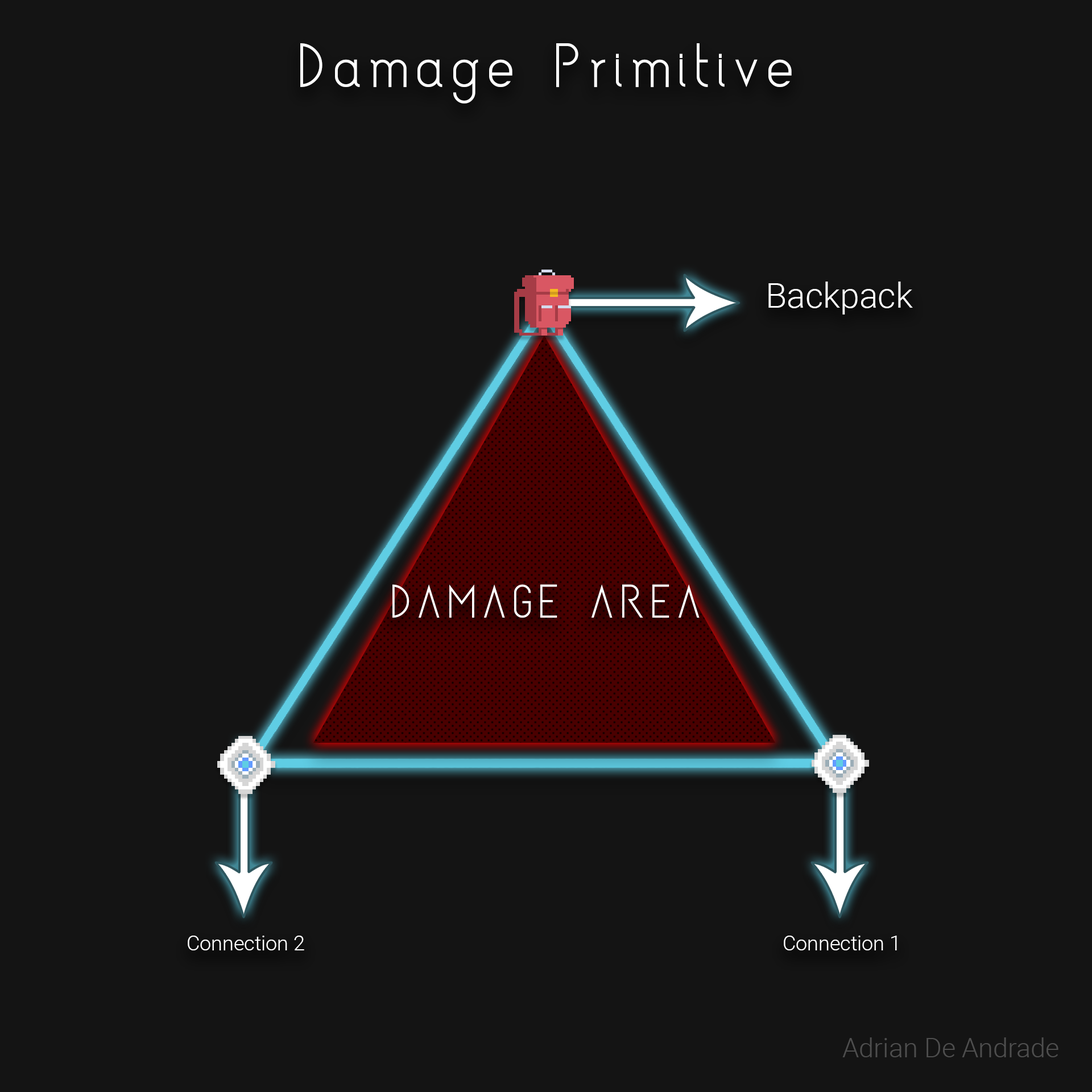
<style>
.page{position:relative;width:1092px;height:1092px;background:#141414}
.page>*{position:absolute;margin:0}
.t1{font:88.7px "Asgalt-Regular";letter-spacing:0.08em;color:#ffffff}
.t2{font:34.6px "Roboto-Light";color:#ffffff}
.t3{font:67px "Asgalt-Regular";letter-spacing:0.08em;color:#ffffff}
.t4{font:20.4px "Roboto-Light";color:#ffffff}
.t5{font:26.7px "Roboto-Light";color:#4e4e4e}
</style>
<div class="page">
<p class="t1" style="left:300px;top:43px;width:492px;height:61px">Damage Primitive</p>
<p class="t2" style="left:768px;top:282px;width:145px;height:33px">Backpack</p>
<p class="t3" style="left:392px;top:584px;width:308px;height:34px">DAMAGE AREA</p>
<p class="t4" style="left:188px;top:936px;width:116px;height:14px">Connection 2</p>
<p class="t4" style="left:784px;top:936px;width:113px;height:14px">Connection 1</p>
<p class="t5" style="left:842px;top:1037px;width:216px;height:20px">Adrian De Andrade</p>
</div>
